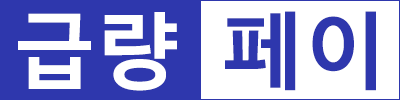
<style>
.page{position:relative;width:400px;height:100px;background:#ffffff}
.page>*{position:absolute;margin:0}
.t1{font:83.3px "MalgunGothicBold";color:#ffffff}
.t2{font:83.3px "MalgunGothicBold";color:#2e37ad}
</style>
<div class="page">
<p class="t1" style="left:18px;top:12px;width:159px;height:79px">급량</p>
<p class="t2" style="left:225px;top:11px;width:151px;height:80px">페이</p>
</div>
